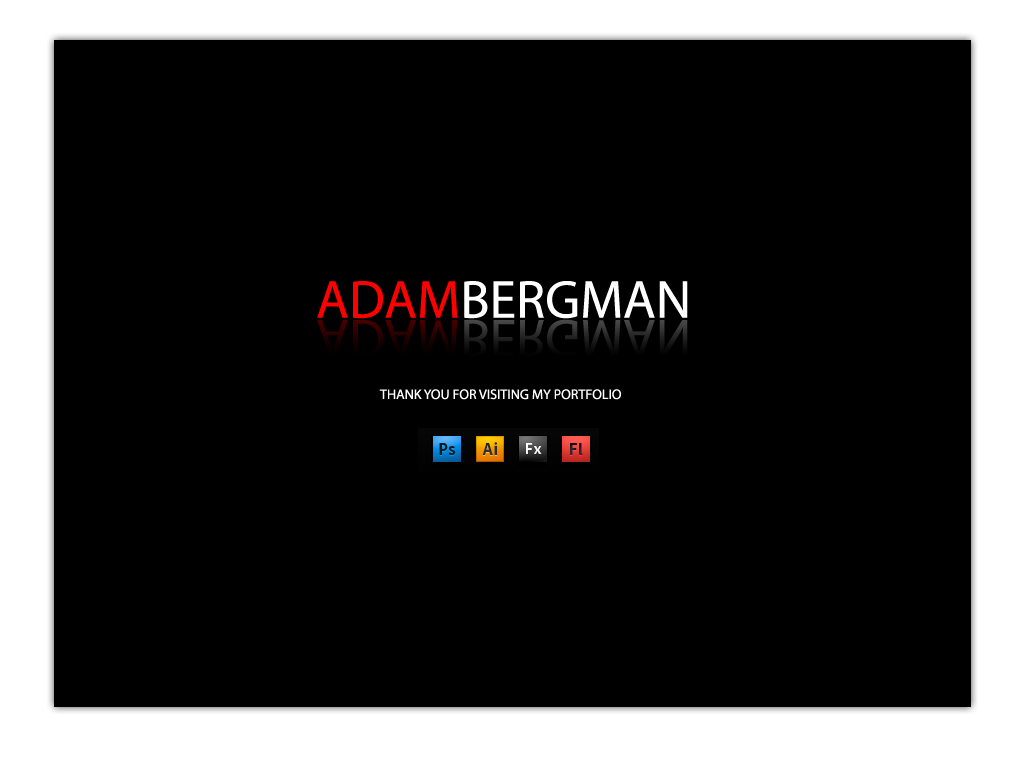
<style>
.page{position:relative;width:1024px;height:768px;background:#000000}
.page>*{position:absolute;margin:0}
.t1{font:53.9px "MyriadPro-Regular";color:#ffffff;text-transform:uppercase}
.t2{font:53.9px "MyriadPro-Regular";color:#ff0000;text-transform:uppercase}
.t3{font:53.9px "MyriadPro-Regular";text-transform:uppercase}
.t4{font:14px "MyriadPro-Regular";color:#ffffff;text-transform:uppercase}
</style>
<div class="page">
<p class="t1" style="left:317px;top:281px;width:371px;height:38px"><span class="t2">adam</span>bergman</p>
<p class="t3" style="left:317px;top:319px;width:371px;height:38px">adambergman</p>
<p class="t4" style="left:379px;top:389px;width:242px;height:11px">Thank you FOR visiting my portfolio</p>
</div>
